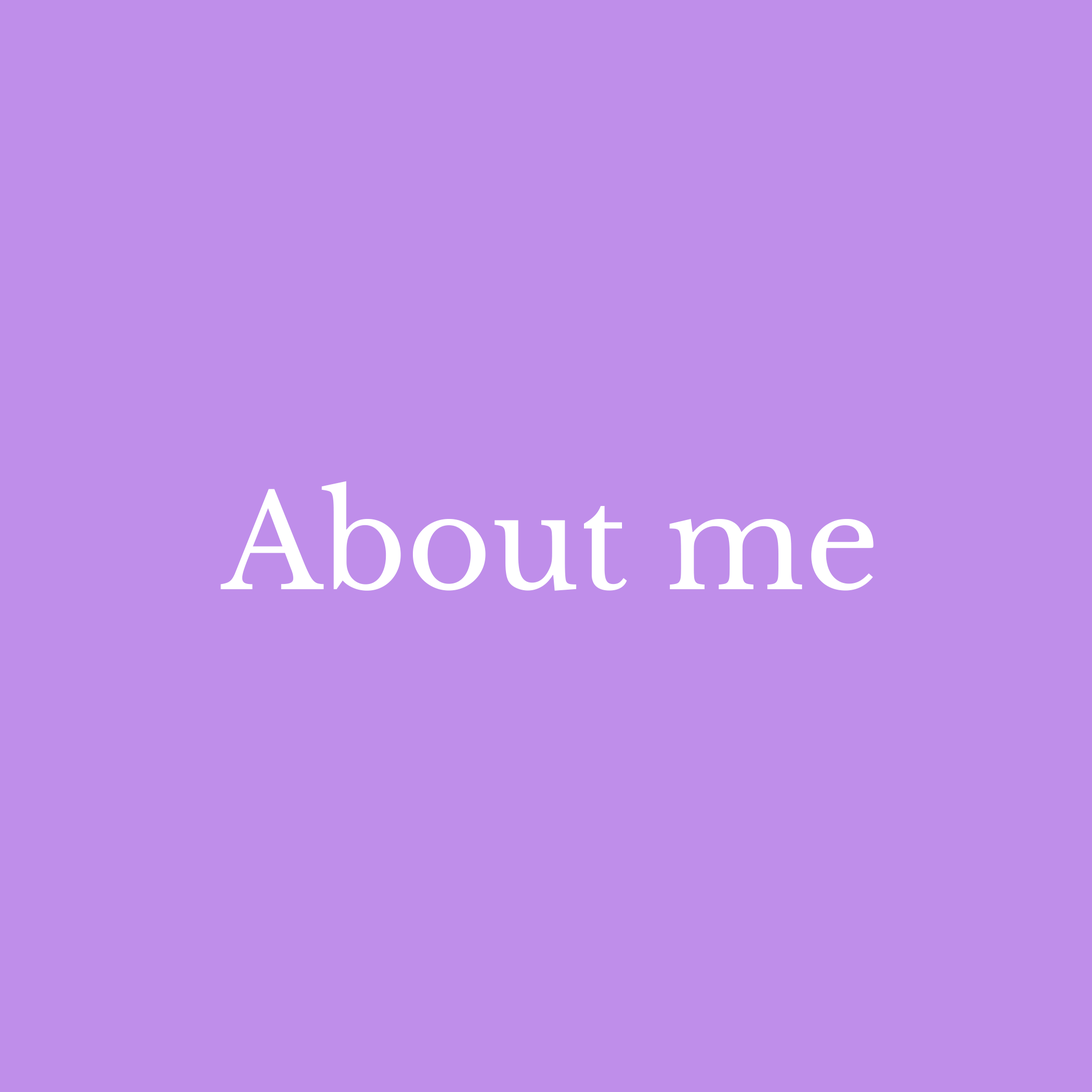
<style>
.page{position:relative;width:1092px;height:1092px;background:#bf8eea}
.page>*{position:absolute;margin:0}
.t1{font:130px "LibreBaskerville-Regular";color:#ffffff}
.t2{font:78px "AutobusBold";color:#000000}
</style>
<div class="page">
<p class="t1" style="left:220px;top:481px;width:654px;height:110px"><span class="t2"><br><br><br></span>About me</p>
</div>
